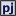
<style>
.page{position:relative;width:16px;height:16px;background:#d9ddec}
.page>*{position:absolute;margin:0}
.t1{font:12px "LucidaSans-Demi";color:#121344}
</style>
<div class="page">
<p class="t1" style="left:3px;top:2px;width:10px;height:13px">pj</p>
</div>
